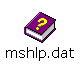
<style>
.page{position:relative;width:80px;height:80px;background:#ffffff}
.page>*{position:absolute;margin:0}
.t1{font:14px "MSReferenceSansSerif";color:#000000}
</style>
<div class="page">
<p class="t1" style="left:6px;top:47px;width:68px;height:14px">mshlp.dat</p>
</div>
